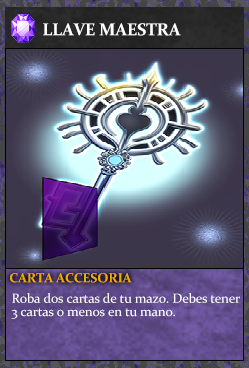
<style>
.page{position:relative;width:249px;height:368px}
.page>*{position:absolute;margin:0}
.t1{font:17.3px "Constantia-Bold";letter-spacing:-0.02em;color:#ffffff}
.t2{font:13.3px "Constantia-Bold";letter-spacing:-0.02em;color:#f2ac05}
.t3{font:13.3px/13.3px "Constantia";letter-spacing:-0.02em;color:#ffffff}
</style>
<div class="page">
<p class="t1" style="left:43px;top:23px;width:138px;height:13px">LLAVE MAESTRA</p>
<p class="t2" style="left:10px;top:273px;width:122px;height:10px">CARTA ACCESORIA</p>
<p class="t3" style="left:11px;top:293px;width:229px;height:26px">Roba dos cartas de tu mazo. Debes tener<br>3 cartas o menos en tu mano.</p>
</div>
